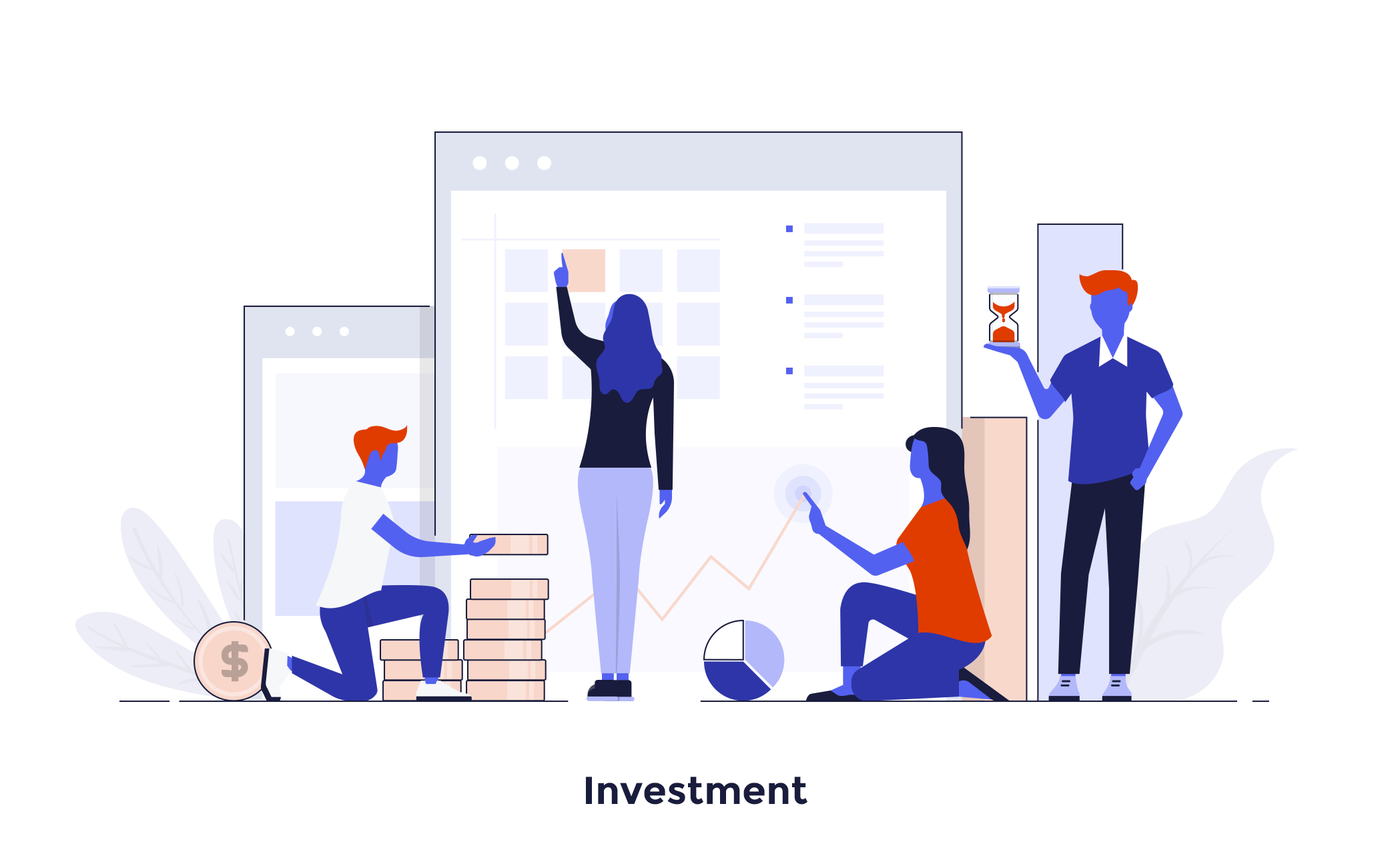
<style>
.page{position:relative;width:1390px;height:858px;background:#ffffff}
.page>*{position:absolute;margin:0}
.t1{font:38.9px "Montserrat-Bold";color:#191c3c}
</style>
<div class="page">
<p class="t1" style="left:586px;top:777px;width:221px;height:28px">Investment</p>
</div>
